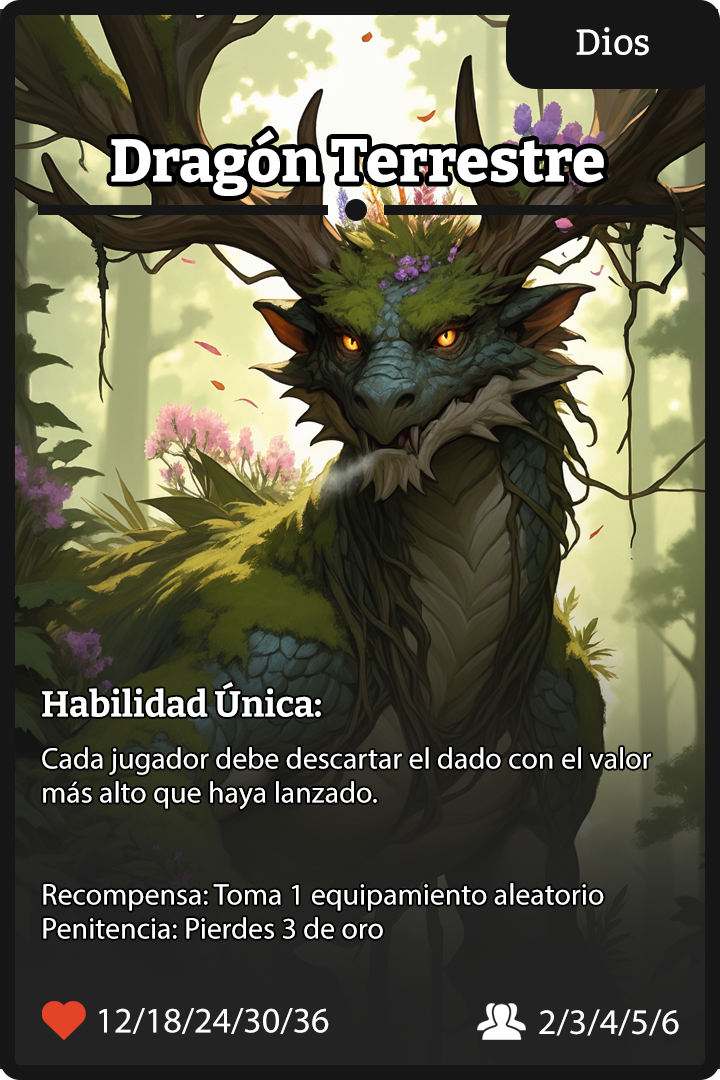
<style>
.page{position:relative;width:720px;height:1080px}
.page>*{position:absolute;margin:0}
.t1{font:36px "Bitter-Regular";color:#ffffff}
.t2{font:60px "Bitter-ExtraBold";color:#ffffff}
.t3{font:36px "Bitter-Bold";color:#ffffff}
.t4{font:30px/34px "Bitter-Regular";color:#ffffff}
</style>
<div class="page">
<p class="t1" style="left:576px;top:27px;width:73px;height:29px">Dios</p>
<p class="t2" style="left:111px;top:130px;width:493px;height:66px">Dragón Terrestre</p>
<p class="t3" style="left:42px;top:682px;width:279px;height:35px">Habilidad Única:</p>
<p class="t4" style="left:42px;top:747px;width:609px;height:192px">Cada jugador debe descartar el dado con el valor más alto que haya lanzado.<br><br><br>Recompensa: Toma 1 equipamiento aleatorio<br>Penitencia: Pierdes 3 de oro</p>
<p class="t1" style="left:99px;top:1008px;width:230px;height:26px">12/18/24/30/36</p>
<p class="t1" style="left:539px;top:1009px;width:140px;height:27px">2/3/4/5/6</p>
</div>
